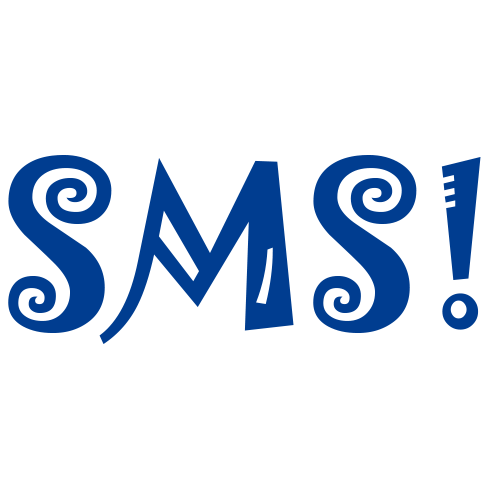
<style>
.page{position:relative;width:500px;height:500px;background:#ffffff}
.page>*{position:absolute;margin:0}
.t1{font:199.6px "Jokerman-Regular";color:#003d90}
</style>
<div class="page">
<p class="t1" style="left:8px;top:155px;width:473px;height:189px">SMS!</p>
</div>
